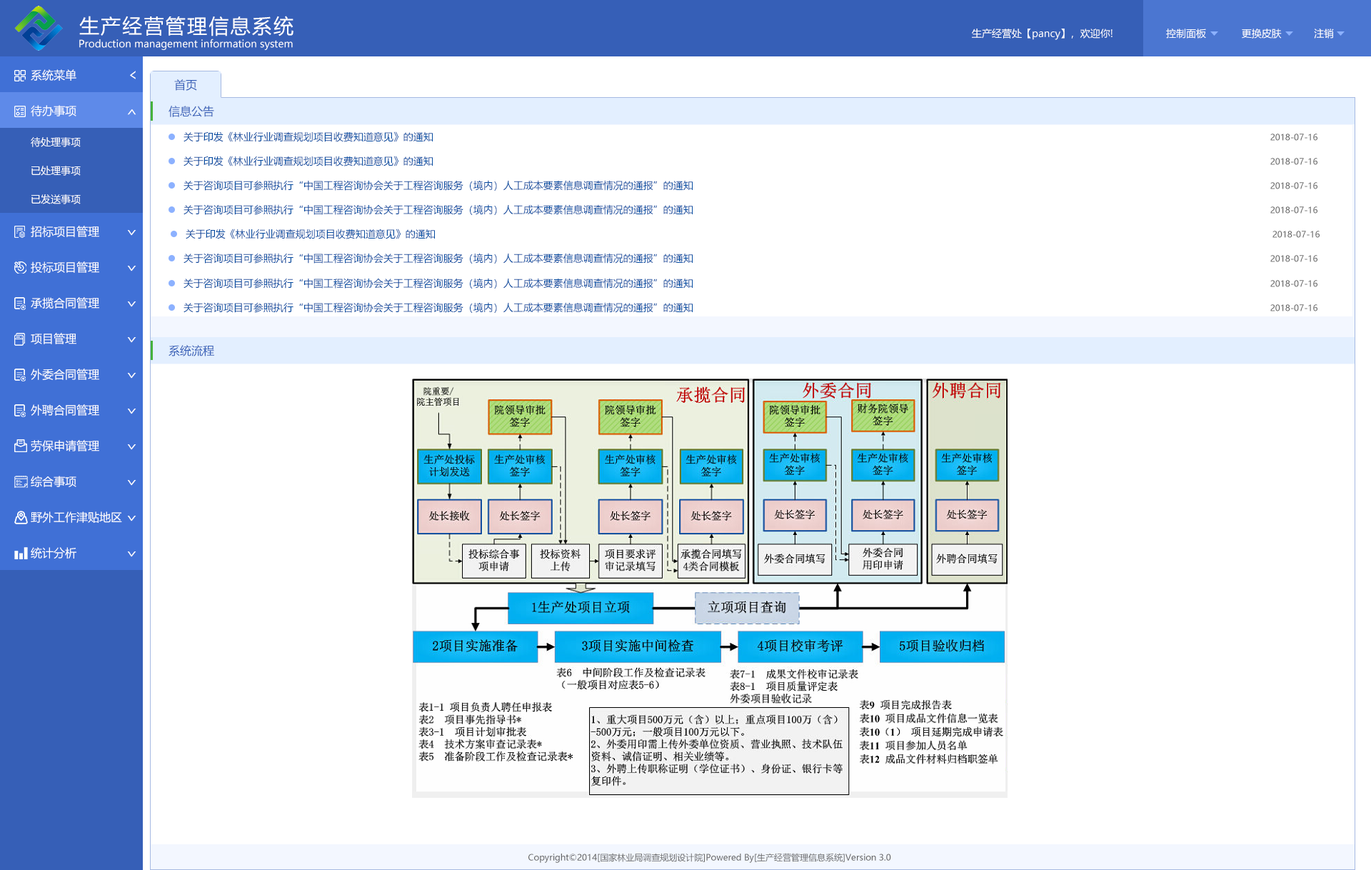
<style>
.page{position:relative;width:1371px;height:870px;background:#ffffff}
.page>*{position:absolute;margin:0}
.t1{font:20px "MicrosoftYaHei";letter-spacing:0.08em;color:#ffffff}
.t2{font:10px "MicrosoftYaHei";color:#ffffff}
.t3{font:11.4px "MicrosoftYaHei";color:#ffffff}
.t4{font:16px "MicrosoftYaHei";color:#ffffff;scale:0.73 1}
.t5{font:11.4px "MicrosoftYaHei";color:#365fb7}
.t6{font:16px "MicrosoftYaHei";color:#ffffff;scale:0.71 1}
.t7{font:10px "MicrosoftYaHei";color:#024aa0}
.t8{font:8.6px "MicrosoftYaHei";color:#666666}
</style>
<div class="page">
<p class="t1" style="left:79px;top:16px;width:214px;height:20px">生产经营管理信息系统</p>
<p class="t2" style="left:972px;top:29px;width:141px;height:11px">生产经营处【pancy】，欢迎你!</p>
<p class="t2" style="left:1166px;top:29px;width:168px;height:10px">控制面板            更换皮肤           注销</p>
<p class="t2" style="left:79px;top:39px;width:214px;height:11px">Production management information system</p>
<p class="t3" style="left:31px;top:69px;width:45px;height:12px">系统菜单</p>
<p class="t4" style="left:130px;top:71px;width:6px;height:8px;rotate:180deg">&gt;</p>
<p class="t5" style="left:174px;top:79px;width:23px;height:12px">首页</p>
<p class="t3" style="left:31px;top:105px;width:45px;height:11px">待办事项</p>
<p class="t6" style="left:127px;top:109px;width:9px;height:6px;rotate:-90deg">&gt;</p>
<p class="t5" style="left:169px;top:106px;width:45px;height:11px">信息公告</p>
<p class="t2" style="left:31px;top:137px;width:50px;height:10px">待处理事项</p>
<p class="t7" style="left:184px;top:131px;width:249px;height:11px">关于印发《林业行业调查规划项目收费知道意见》的通知</p>
<p class="t8" style="left:1270px;top:134px;width:47px;height:7px">2018-07-16</p>
<p class="t7" style="left:184px;top:156px;width:249px;height:10px">关于印发《林业行业调查规划项目收费知道意见》的通知</p>
<p class="t8" style="left:1270px;top:158px;width:47px;height:7px">2018-07-16</p>
<p class="t2" style="left:31px;top:166px;width:50px;height:10px">已处理事项</p>
<p class="t7" style="left:184px;top:180px;width:509px;height:11px">关于咨询项目可参照执行“中国工程咨询协会关于工程咨询服务（境内）人工成本要素信息调查情况的通报”的通知</p>
<p class="t8" style="left:1270px;top:182px;width:47px;height:7px">2018-07-16</p>
<p class="t2" style="left:31px;top:194px;width:50px;height:10px">已发送事项</p>
<p class="t7" style="left:184px;top:204px;width:509px;height:11px">关于咨询项目可参照执行“中国工程咨询协会关于工程咨询服务（境内）人工成本要素信息调查情况的通报”的通知</p>
<p class="t8" style="left:1270px;top:206px;width:47px;height:8px">2018-07-16</p>
<p class="t3" style="left:31px;top:226px;width:68px;height:11px">招标项目管理</p>
<p class="t6" style="left:127px;top:230px;width:9px;height:6px;rotate:90deg">&gt;</p>
<p class="t7" style="left:186px;top:229px;width:249px;height:10px">关于印发《林业行业调查规划项目收费知道意见》的通知</p>
<p class="t8" style="left:1272px;top:231px;width:48px;height:7px">2018-07-16</p>
<p class="t7" style="left:184px;top:253px;width:509px;height:10px">关于咨询项目可参照执行“中国工程咨询协会关于工程咨询服务（境内）人工成本要素信息调查情况的通报”的通知</p>
<p class="t8" style="left:1270px;top:255px;width:47px;height:7px">2018-07-16</p>
<p class="t3" style="left:31px;top:261px;width:68px;height:12px">投标项目管理</p>
<p class="t6" style="left:127px;top:266px;width:9px;height:5px;rotate:90deg">&gt;</p>
<p class="t7" style="left:184px;top:278px;width:509px;height:10px">关于咨询项目可参照执行“中国工程咨询协会关于工程咨询服务（境内）人工成本要素信息调查情况的通报”的通知</p>
<p class="t8" style="left:1270px;top:280px;width:47px;height:7px">2018-07-16</p>
<p class="t3" style="left:31px;top:297px;width:68px;height:12px">承揽合同管理</p>
<p class="t6" style="left:127px;top:301px;width:9px;height:6px;rotate:90deg">&gt;</p>
<p class="t7" style="left:184px;top:302px;width:509px;height:11px">关于咨询项目可参照执行“中国工程咨询协会关于工程咨询服务（境内）人工成本要素信息调查情况的通报”的通知</p>
<p class="t8" style="left:1270px;top:304px;width:47px;height:7px">2018-07-16</p>
<p class="t3" style="left:31px;top:333px;width:45px;height:11px">项目管理</p>
<p class="t6" style="left:127px;top:337px;width:9px;height:6px;rotate:90deg">&gt;</p>
<p class="t5" style="left:169px;top:345px;width:45px;height:11px">系统流程</p>
<p class="t3" style="left:31px;top:368px;width:68px;height:12px">外委合同管理</p>
<p class="t6" style="left:127px;top:373px;width:9px;height:5px;rotate:90deg">&gt;</p>
<p class="t3" style="left:31px;top:404px;width:68px;height:12px">外聘合同管理</p>
<p class="t6" style="left:127px;top:408px;width:9px;height:6px;rotate:90deg">&gt;</p>
<p class="t3" style="left:31px;top:440px;width:68px;height:11px">劳保申请管理</p>
<p class="t6" style="left:127px;top:444px;width:9px;height:6px;rotate:90deg">&gt;</p>
<p class="t3" style="left:31px;top:476px;width:45px;height:11px">综合事项</p>
<p class="t6" style="left:127px;top:480px;width:9px;height:6px;rotate:90deg">&gt;</p>
<p class="t3" style="left:31px;top:511px;width:91px;height:12px">野外工作津贴地区</p>
<p class="t6" style="left:127px;top:516px;width:9px;height:5px;rotate:90deg">&gt;</p>
<p class="t3" style="left:31px;top:547px;width:45px;height:11px">统计分析</p>
<p class="t6" style="left:127px;top:551px;width:9px;height:6px;rotate:90deg">&gt;</p>
<p class="t8" style="left:528px;top:853px;width:363px;height:10px">Copyright©2014[国家林业局调查规划设计院]Powered By[生产经营管理信息系统]Version 3.0</p>
</div>
